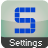
<style>
.page{position:relative;width:48px;height:48px}
.page>*{position:absolute;margin:0}
.t1{font:48px "Astronaut";color:#0744d0}
.t2{font:9px "Small Fonts";color:#f3f3f3}
</style>
<div class="page">
<p class="t1" style="left:14px;top:7px;width:22px;height:27px">S</p>
<p class="t2" style="left:9px;top:39px;width:33px;height:9px">Settings</p>
</div>
